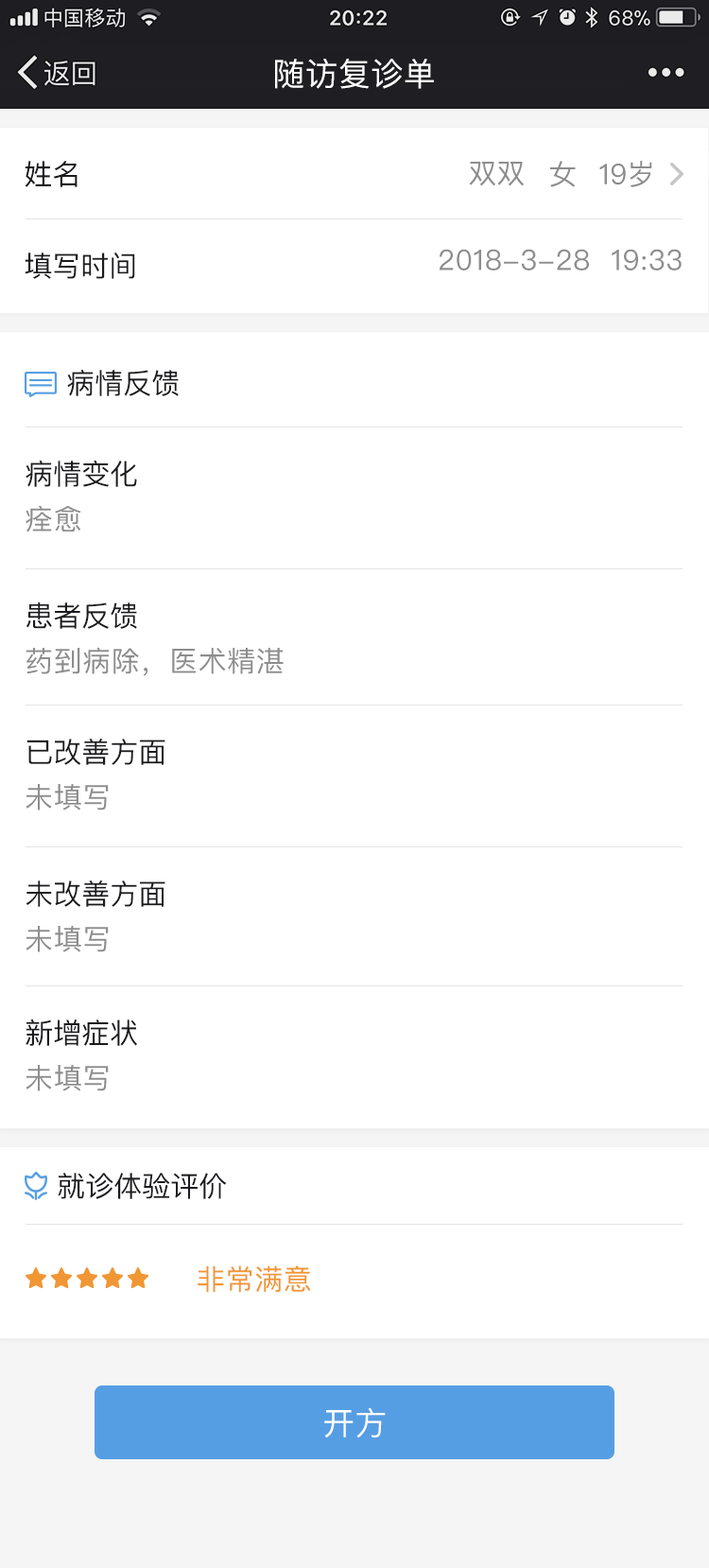
<style>
.page{position:relative;width:709px;height:1568px;background:#ffffff}
.page>*{position:absolute;margin:0}
.t1{font:32.2px "PingFangSC-Regular";letter-spacing:0.02em;color:#ffffff}
.t2{font:28.4px "PingFangSC-Regular";color:#1b1b1f}
.t3{font:28.4px "PingFangSC-Regular";color:#8d8d8d}
.t4{font:28.4px "PingFangSC-Regular";letter-spacing:0.02em;color:#8d8d8d}
.t5{font:28.4px "PingFangSC-Regular";letter-spacing:0.02em;color:#f19634}
.t6{font:32.2px "PingFangSC-Regular";color:#ffffff}
</style>
<div class="page">
<p class="t1" style="left:275px;top:59px;width:159px;height:30px">随访复诊单</p>
<p class="t2" style="left:25px;top:161px;width:53px;height:26px">姓名</p>
<p class="t3" style="left:469px;top:162px;width:55px;height:24px">双双</p>
<p class="t3" style="left:550px;top:161px;width:26px;height:26px">女</p>
<p class="t3" style="left:600px;top:161px;width:53px;height:26px">19岁</p>
<p class="t2" style="left:25px;top:253px;width:110px;height:26px">填写时间</p>
<p class="t4" style="left:439px;top:249px;width:243px;height:21px">2018-3-28  19:33</p>
<p class="t2" style="left:67px;top:370px;width:112px;height:26px">病情反馈</p>
<p class="t2" style="left:26px;top:461px;width:111px;height:26px">病情变化</p>
<p class="t4" style="left:26px;top:505px;width:55px;height:27px">痊愈</p>
<p class="t2" style="left:26px;top:602px;width:111px;height:27px">患者反馈</p>
<p class="t4" style="left:26px;top:647px;width:258px;height:29px">药到病除，医术精湛</p>
<p class="t2" style="left:26px;top:739px;width:140px;height:26px">已改善方面</p>
<p class="t4" style="left:26px;top:783px;width:83px;height:27px">未填写</p>
<p class="t2" style="left:26px;top:880px;width:140px;height:27px">未改善方面</p>
<p class="t4" style="left:26px;top:925px;width:83px;height:27px">未填写</p>
<p class="t2" style="left:26px;top:1019px;width:112px;height:27px">新增症状</p>
<p class="t4" style="left:26px;top:1064px;width:83px;height:27px">未填写</p>
<p class="t2" style="left:58px;top:1173px;width:169px;height:26px">就诊体验评价</p>
<p class="t5" style="left:198px;top:1265px;width:113px;height:28px">非常满意</p>
<p class="t6" style="left:324px;top:1407px;width:62px;height:31px">开方</p>
</div>
